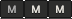
<style>
.page{position:relative;width:72px;height:19px;background:#2d2d2c}
.page>*{position:absolute;margin:0}
.t1{font:10px "HelveticaNeueLTStd-Roman";letter-spacing:0.2em;color:#adacac}
.t2{font:10px "HelveticaNeueLTStd-Roman";letter-spacing:0.2em;color:#e5e2db}
</style>
<div class="page">
<p class="t1" style="left:8px;top:5px;width:8px;height:8px">M</p>
<p class="t2" style="left:32px;top:5px;width:8px;height:8px">M</p>
<p class="t2" style="left:56px;top:5px;width:8px;height:8px">M</p>
</div>
